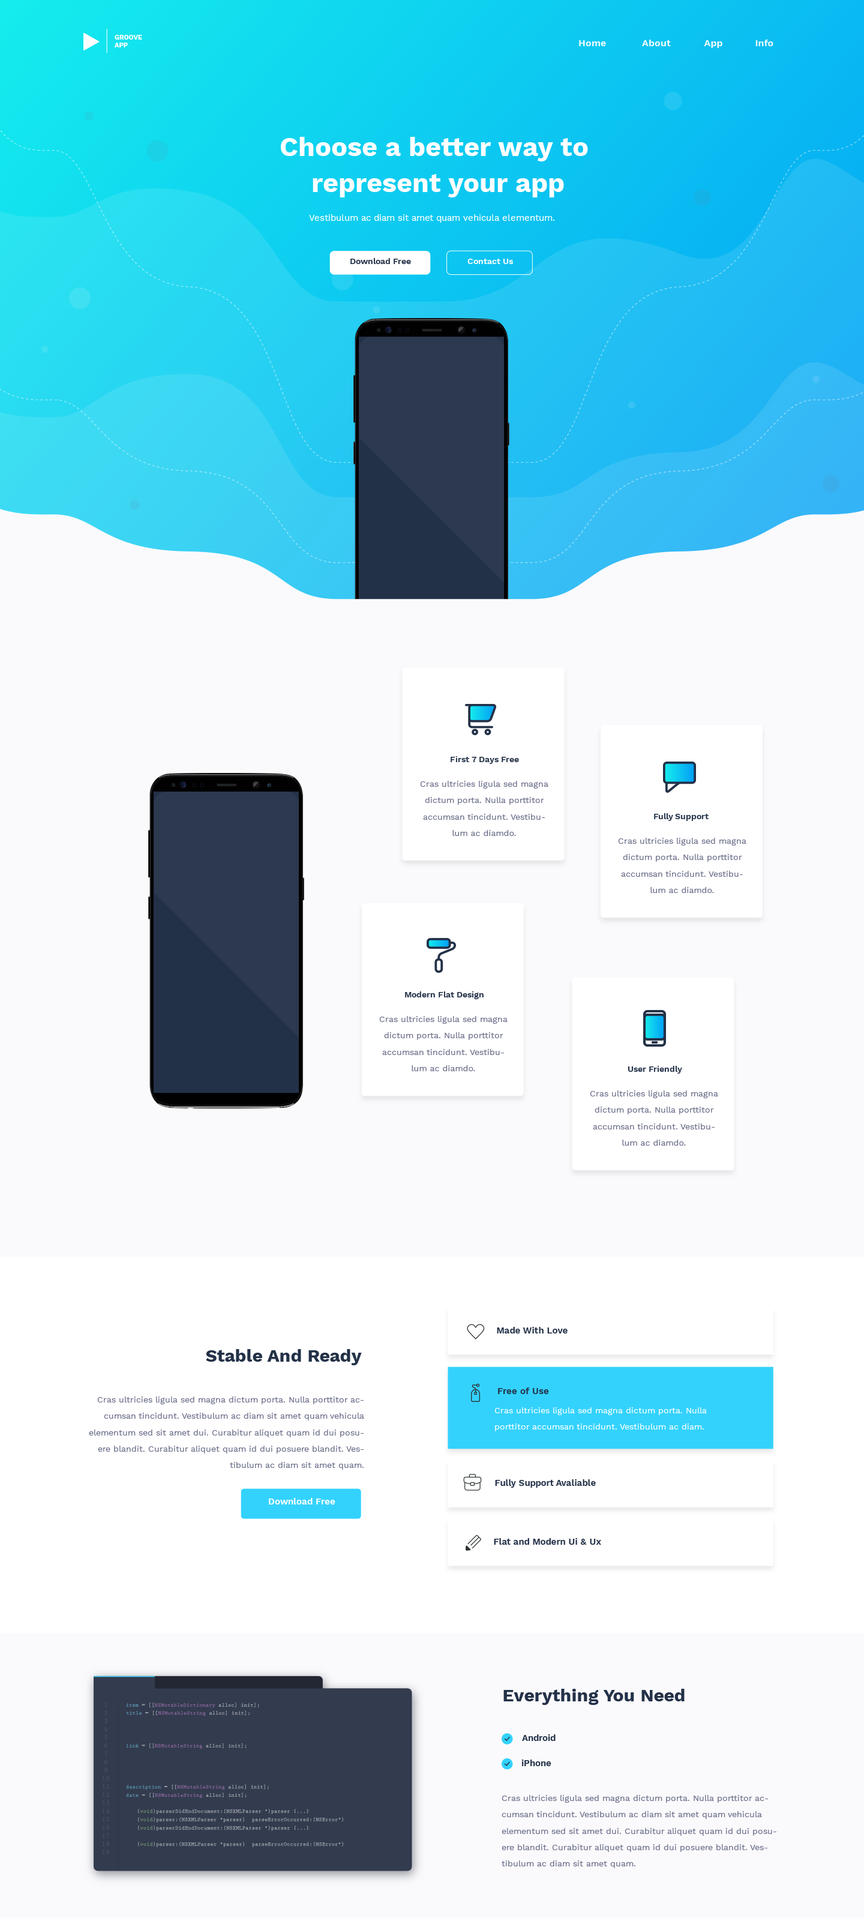
<style>
.page{position:relative;width:864px;height:1918px;background:#fafafc}
.page>*{position:absolute;margin:0}
.t1{font:9.5px "WorkSans-SemiBold";color:#ffffff}
.t2{font:27px/36px "WorkSans-Bold";color:#ffffff}
.t3{font:9px "WorkSans-Regular";color:#ffffff}
.t4{font:8.4px "WorkSans-SemiBold";color:#233148}
.t5{font:8.4px "WorkSans-SemiBold";color:#ffffff}
.t6{font:8.4px/16.3px "WorkSans-Regular";color:#6a6d89}
.t7{font:9px "WorkSans-SemiBold";color:#233148}
.t8{font:18px "WorkSans-Bold";color:#233148}
.t9{font:8.4px/16.3px "WorkSans-Regular";color:#ffffff}
.t10{font:9px "WorkSans-SemiBold";color:#ffffff}
</style>
<div class="page">
<p class="t1" style="left:579px;top:40px;width:27px;height:6px">Home</p>
<p class="t1" style="left:642px;top:40px;width:29px;height:6px">About</p>
<p class="t1" style="left:704px;top:40px;width:18px;height:8px">App</p>
<p class="t1" style="left:755px;top:40px;width:18px;height:6px">Info</p>
<p class="t2" style="left:281px;top:137px;width:307px;height:60px;text-align:center">Choose a better way to <br>represent your app</p>
<p class="t3" style="left:309px;top:214px;width:246px;height:9px">Vestibulum ac diam sit amet quam vehicula elementum.</p>
<p class="t4" style="left:350px;top:258px;width:61px;height:6px">Download Free</p>
<p class="t5" style="left:467px;top:259px;width:46px;height:5px">Contact Us</p>
<p class="t4" style="left:451px;top:756px;width:68px;height:8px">First 7 Days Free</p>
<p class="t6" style="left:420px;top:781px;width:128px;height:55px;text-align:center">Cras ultricies ligula sed magna dictum porta. Nulla porttitor accumsan tincidunt. Vestibulum ac diamdo.</p>
<p class="t4" style="left:654px;top:813px;width:55px;height:8px">Fully Support</p>
<p class="t6" style="left:618px;top:838px;width:128px;height:55px;text-align:center">Cras ultricies ligula sed magna dictum porta. Nulla porttitor accumsan tincidunt. Vestibulum ac diamdo.</p>
<p class="t4" style="left:405px;top:991px;width:79px;height:8px">Modern Flat Design</p>
<p class="t6" style="left:379px;top:1016px;width:129px;height:55px;text-align:center">Cras ultricies ligula sed magna dictum porta. Nulla porttitor accumsan tincidunt. Vestibulum ac diamdo.</p>
<p class="t4" style="left:628px;top:1066px;width:54px;height:7px">User Friendly</p>
<p class="t6" style="left:590px;top:1090px;width:128px;height:55px;text-align:center">Cras ultricies ligula sed magna dictum porta. Nulla porttitor accumsan tincidunt. Vestibulum ac diamdo.</p>
<p class="t7" style="left:497px;top:1327px;width:71px;height:6px">Made With Love</p>
<p class="t8" style="left:206px;top:1349px;width:156px;height:16px">Stable And Ready</p>
<p class="t6" style="left:89px;top:1396px;width:275px;height:73px;text-align:right">Cras ultricies ligula sed magna dictum porta. Nulla porttitor accumsan tincidunt. Vestibulum ac diam sit amet quam vehicula elementum sed sit amet dui. Curabitur aliquet quam id dui posuere blandit. Curabitur aliquet quam id dui posuere blandit. Vestibulum ac diam sit amet quam.</p>
<p class="t7" style="left:498px;top:1387px;width:51px;height:7px">Free of Use</p>
<p class="t9" style="left:494px;top:1407px;width:213px;height:24px">Cras ultricies ligula sed magna dictum porta. Nulla porttitor accumsan tincidunt. Vestibulum ac diam.</p>
<p class="t7" style="left:495px;top:1479px;width:101px;height:8px">Fully Support Avaliable</p>
<p class="t10" style="left:269px;top:1498px;width:66px;height:6px">Download Free</p>
<p class="t7" style="left:494px;top:1538px;width:107px;height:6px">Flat and Modern Ui &amp; Ux</p>
<p class="t8" style="left:503px;top:1688px;width:182px;height:17px">Everything You Need</p>
<p class="t7" style="left:522px;top:1734px;width:34px;height:7px">Android</p>
<p class="t7" style="left:521px;top:1759px;width:30px;height:7px">iPhone</p>
<p class="t6" style="left:502px;top:1795px;width:274px;height:73px">Cras ultricies ligula sed magna dictum porta. Nulla porttitor accumsan tincidunt. Vestibulum ac diam sit amet quam vehicula elementum sed sit amet dui. Curabitur aliquet quam id dui posuere blandit. Curabitur aliquet quam id dui posuere blandit. Vestibulum ac diam sit amet quam.</p>
</div>
